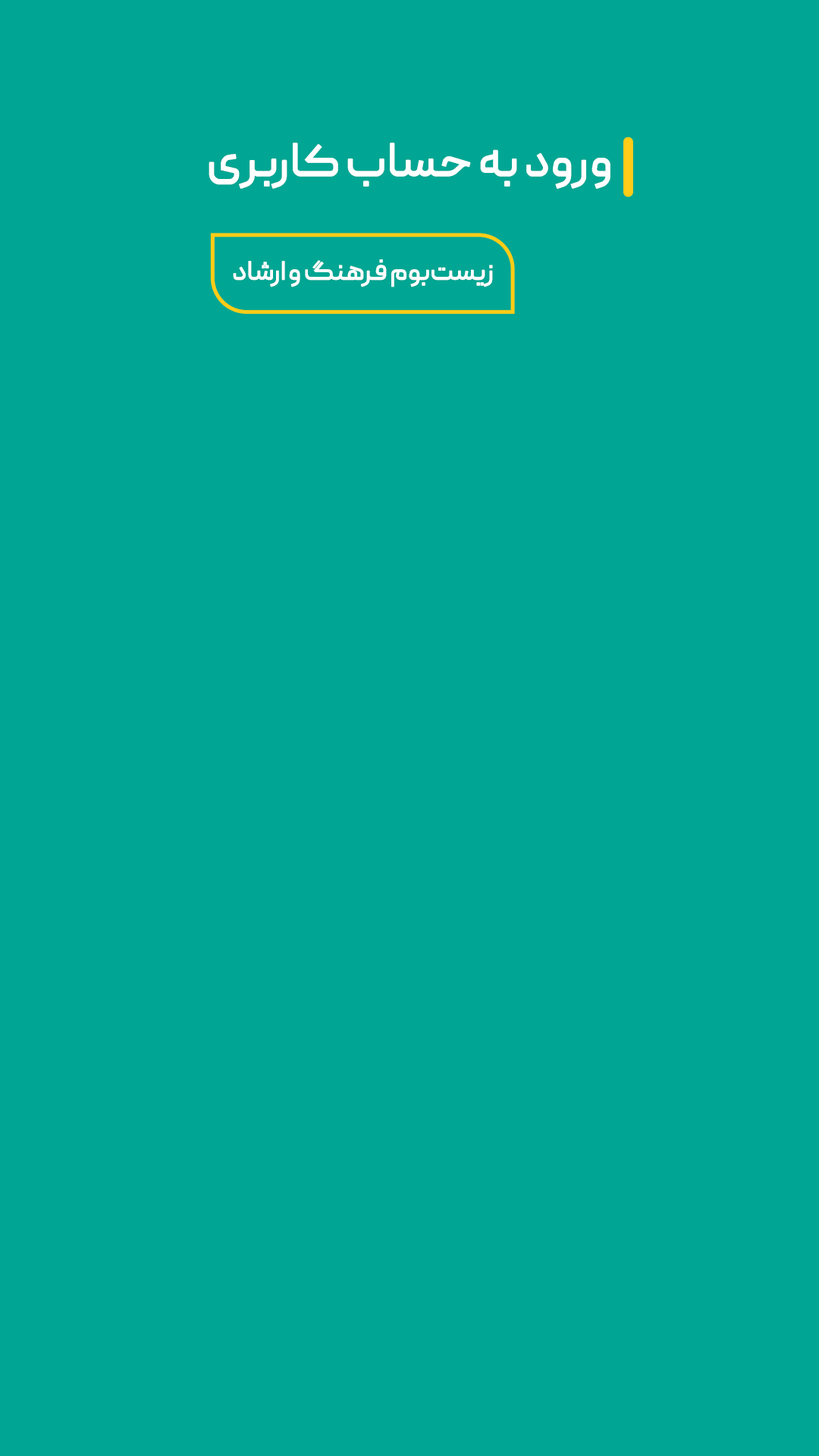
<style>
.page{position:relative;width:819px;height:1456px;background:#00a693}
.page>*{position:absolute;margin:0}
.t1{font:83.9px "Peyda-Regular";letter-spacing:-0.025em;color:#ffffff;font-weight:bold}
.t2{font:47.3px "Peyda-Regular";letter-spacing:-0.025em;color:#ffffff;font-weight:bold}
</style>
<div class="page">
<p class="t1" style="left:209px;top:143px;width:401px;height:46px">ورود به حساب کاربری</p>
<p class="t2" style="left:233px;top:259px;width:260px;height:28px">زیست‌بوم فرهنگ و ارشاد</p>
</div>
